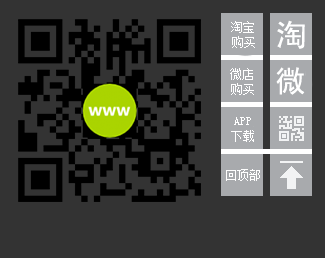
<style>
.page{position:relative;width:325px;height:258px;background:#333333}
.page>*{position:absolute;margin:0}
.t1{font:12px "SimSun";color:#ffffff}
.t2{font:30px "SimHei";color:#ffffff}
</style>
<div class="page">
<p class="t1" style="left:231px;top:21px;width:23px;height:12px">淘宝</p>
<p class="t2" style="left:277px;top:20px;width:28px;height:29px">淘</p>
<p class="t1" style="left:232px;top:36px;width:23px;height:12px">购买</p>
<p class="t1" style="left:230px;top:68px;width:23px;height:12px">微店</p>
<p class="t2" style="left:276px;top:67px;width:29px;height:28px">微</p>
<p class="t1" style="left:231px;top:83px;width:23px;height:12px">购买</p>
<p class="t1" style="left:234px;top:117px;width:17px;height:8px">APP</p>
<p class="t1" style="left:231px;top:130px;width:23px;height:12px">下载</p>
</div>
